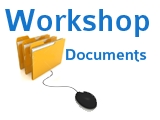
<style>
.page{position:relative;width:160px;height:120px;background:#ffffff}
.page>*{position:absolute;margin:0}
.t1{font:33px "Colaborate-Medium";color:#1376cc}
.t2{font:17px "Colaborate-Medium";color:#1376cc}
</style>
<div class="page">
<p class="t1" style="left:5px;top:9px;width:144px;height:28px">Workshop</p>
<p class="t2" style="left:66px;top:49px;width:81px;height:13px">Documents</p>
</div>
